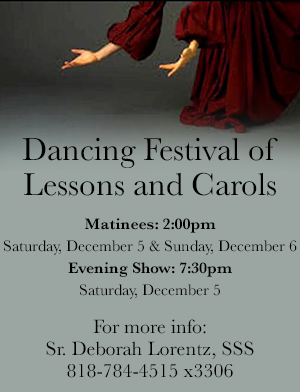
<style>
.page{position:relative;width:300px;height:392px;background:#9ba6a2}
.page>*{position:absolute;margin:0}
.t1{font:33px/35px "Baskerville";color:#000000}
.t2{font:16px/22px "Baskerville";color:#000000}
.t3{font:16px/22px "Baskerville-SemiBold";color:#000000}
.t4{font:20px/22px "Baskerville";color:#000000}
</style>
<div class="page">
<p class="t1" style="left:22px;top:137px;width:256px;height:59px;text-align:center">Dancing Festival of <br>Lessons and Carols</p>
<p class="t2" style="left:4px;top:218px;width:293px;height:81px;text-align:center"><span class="t3">Matinees: 2:00pm<br></span>Saturday, December 5 &amp; Sunday, December 6<br><span class="t3">Evening Show: 7:30pm<br></span>Saturday, December 5</p>
<p class="t4" style="left:46px;top:319px;width:208px;height:59px;text-align:center">For more info: <br>Sr. Deborah Lorentz, SSS<br>818-784-4515 x3306</p>
</div>
